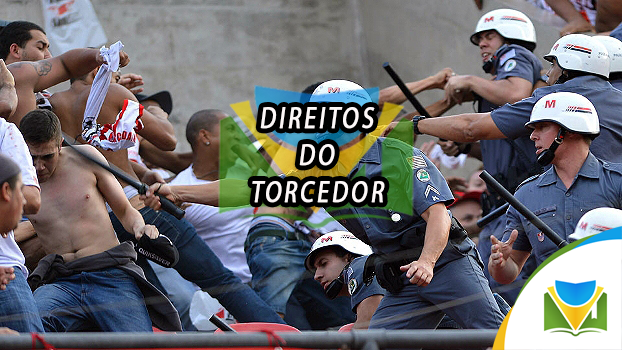
<style>
.page{position:relative;width:622px;height:350px}
.page>*{position:absolute;margin:0}
.t1{font:30.1px/18.5px "MyriadPro-Regular";letter-spacing:0.1em;color:#fdf8f8;text-transform:uppercase;font-weight:bold;font-style:italic;scale:0.77 1}
</style>
<div class="page">
<p class="t1" style="left:252px;top:107px;width:133px;height:96px;text-align:center">DIREITOS <br><br>DO<br><br>TORCEDOR</p>
</div>
